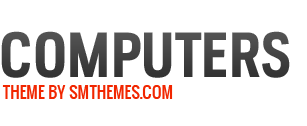
<style>
.page{position:relative;width:307px;height:126px;background:#ffffff}
.page>*{position:absolute;margin:0}
.t1{font:60px "VerioxRg-Bold";letter-spacing:-0.025em;color:#444444;text-transform:uppercase}
.t2{font:16px "Oswald";letter-spacing:-0.025em;color:#f12600;text-transform:uppercase}
</style>
<div class="page">
<p class="t1" style="left:1px;top:31px;width:289px;height:47px">ComputerS</p>
<p class="t2" style="left:2px;top:85px;width:171px;height:14px">Theme by smthemes.com</p>
</div>
